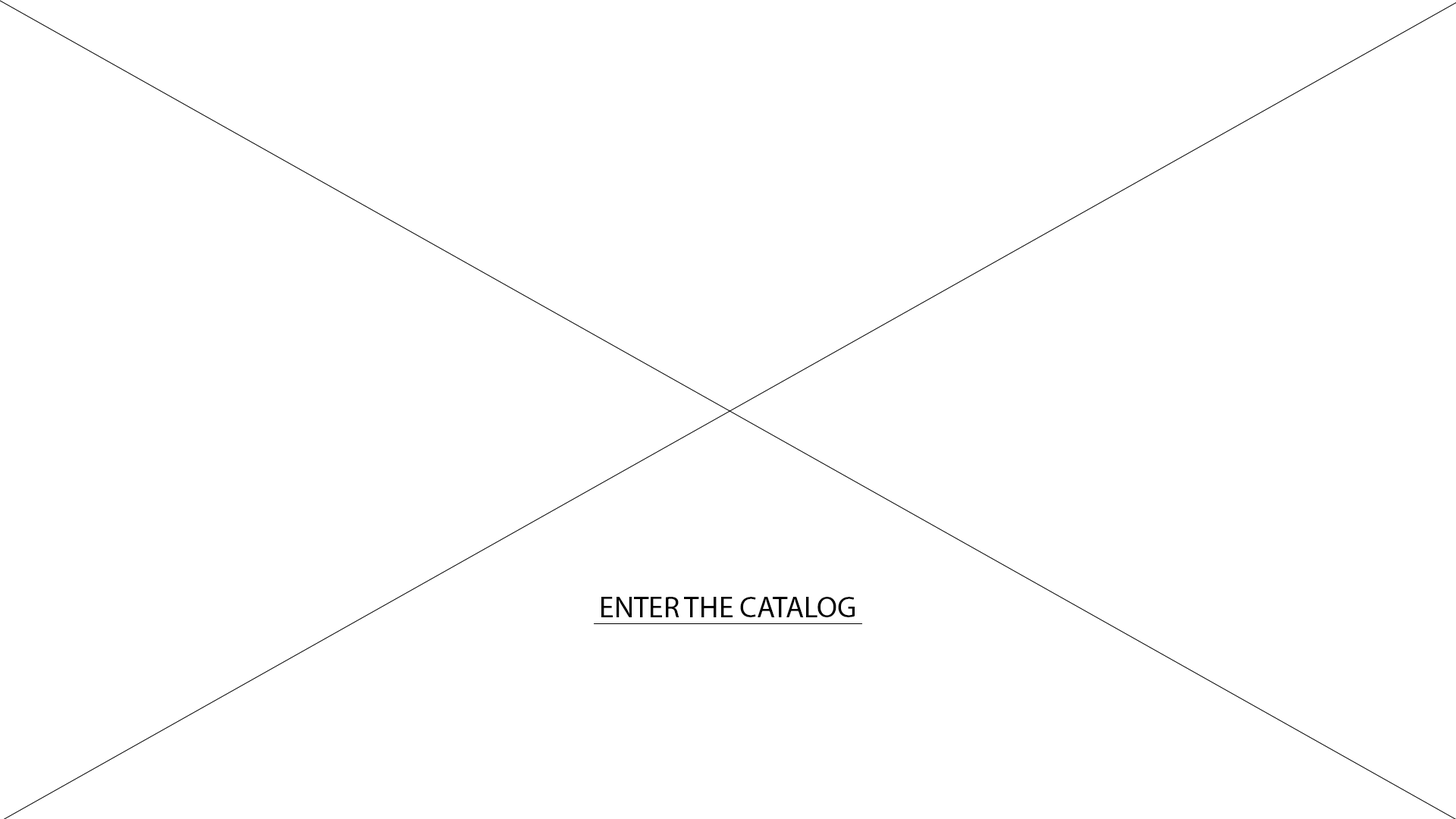
<style>
.page{position:relative;width:1456px;height:819px;background:#ffffff}
.page>*{position:absolute;margin:0}
.t1{font:29.8px "MyriadPro-Regular";color:#000000}
</style>
<div class="page">
<p class="t1" style="left:601px;top:597px;width:254px;height:20px">ENTER THE CATALOG</p>
</div>
